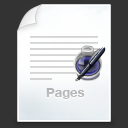
<style>
.page{position:relative;width:128px;height:128px;background:#333333}
.page>*{position:absolute;margin:0}
.t1{font:13px "HelveticaNeue-Bold";color:#cccccc}
</style>
<div class="page">
<p class="t1" style="left:46px;top:88px;width:39px;height:11px">Pages</p>
</div>
